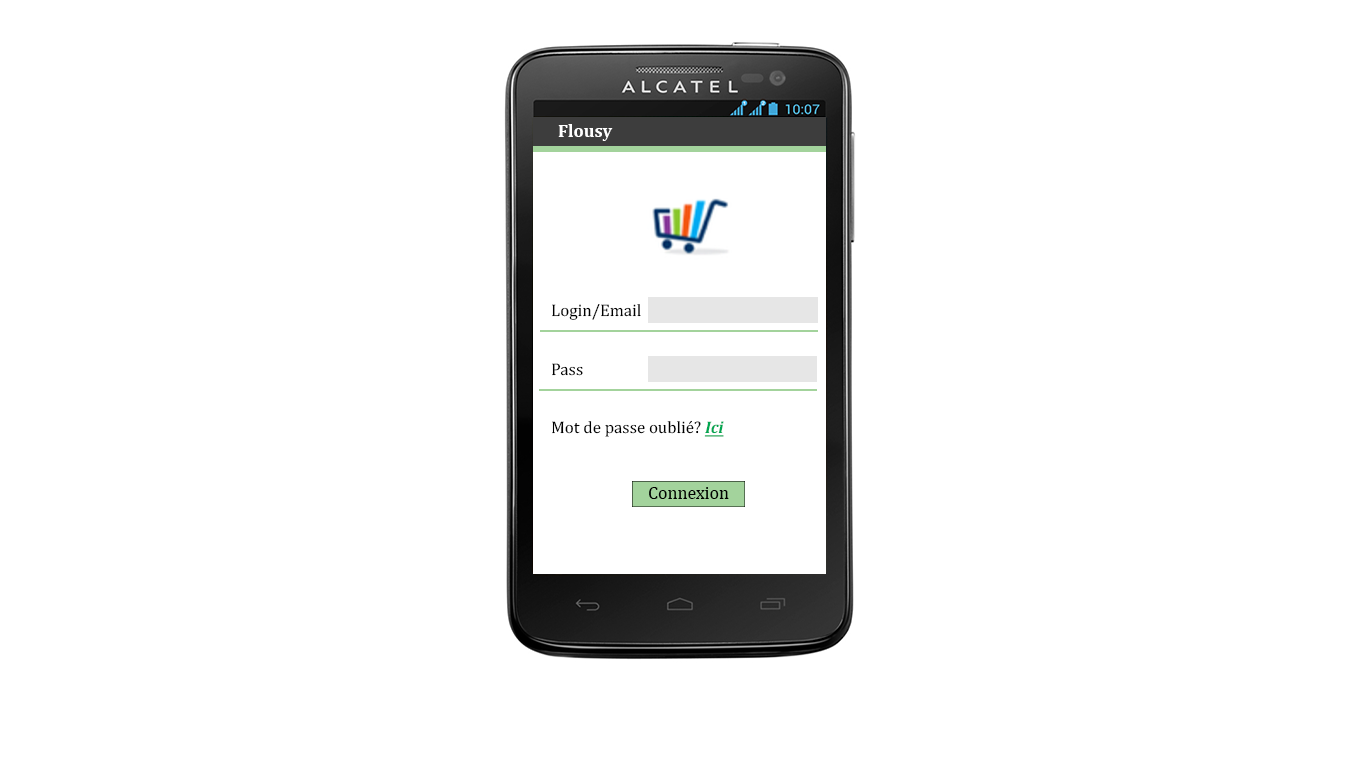
<style>
.page{position:relative;width:1366px;height:768px;background:#ffffff}
.page>*{position:absolute;margin:0}
.t1{font:18px "Cambria-Bold";color:#ffffff}
.t2{font:17px "Cambria";color:#000000}
.t3{font:17px "Cambria-BoldItalic";color:#00a651;text-decoration:underline}
.t4{font:17.9px "Cambria";color:#000000}
</style>
<div class="page">
<p class="t1" style="left:558px;top:124px;width:55px;height:17px">Flousy</p>
<p class="t2" style="left:552px;top:304px;width:89px;height:16px">Login/Email</p>
<p class="t2" style="left:552px;top:363px;width:31px;height:13px">Pass</p>
<p class="t2" style="left:552px;top:420px;width:172px;height:17px">Mot de passe oublié? <span class="t3">Ici</span></p>
<p class="t4" style="left:649px;top:487px;width:80px;height:12px">Connexion</p>
</div>
